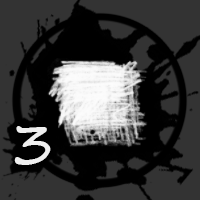
<style>
.page{position:relative;width:200px;height:200px;background:#333333}
.page>*{position:absolute;margin:0}
.t1{font:60px "SegoePrint";color:#efefef}
</style>
<div class="page">
<p class="t1" style="left:14px;top:126px;width:37px;height:39px">3</p>
</div>
